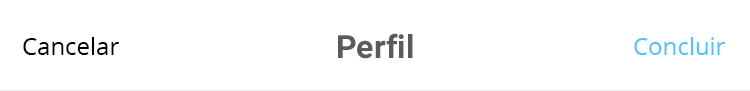
<style>
.page{position:relative;width:750px;height:91px;background:#ffffff}
.page>*{position:absolute;margin:0}
.t1{font:24px "OpenSans";color:#000000}
.t2{font:32px "Roboto-Bold";color:#5d5a58}
.t3{font:24px "OpenSans";color:#53c2fa}
</style>
<div class="page">
<p class="t1" style="left:23px;top:37px;width:96px;height:18px">Cancelar</p>
<p class="t2" style="left:338px;top:33px;width:75px;height:26px">Perfil</p>
<p class="t3" style="left:634px;top:37px;width:91px;height:18px">Concluir</p>
</div>
